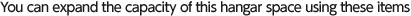
<style>
.page{position:relative;width:411px;height:16px;background:#ffffff}
.page>*{position:absolute;margin:0}
.t1{font:13px "UDShinGoPro-Medium";letter-spacing:-0.04em;color:#1b1b1b}
</style>
<div class="page">
<p class="t1" style="left:0px;top:1px;width:410px;height:15px">You can expand the capacity of this hangar space using these items</p>
</div>
